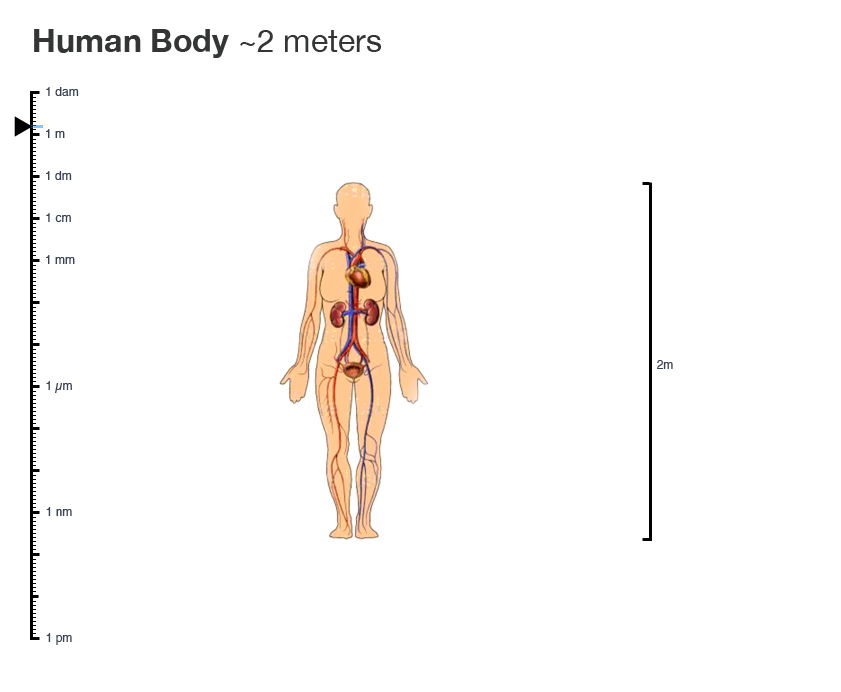
<style>
.page{position:relative;width:841px;height:692px;background:#ffffff}
.page>*{position:absolute;margin:0}
.t1{font:32px "HelveticaNeue-Bold";color:#343535}
.t2{font:32px "HelveticaNeue";color:#343535}
.t3{font:12px "Helvetica";color:#394255}
</style>
<div class="page">
<p class="t1" style="left:34px;top:29px;width:347px;height:29px">Human Body <span class="t2">~2 meters</span></p>
<p class="t3" style="left:46px;top:87px;width:33px;height:9px">1 dam</p>
<p class="t3" style="left:46px;top:129px;width:19px;height:9px">1 m</p>
<p class="t3" style="left:46px;top:171px;width:26px;height:9px">1 dm</p>
<p class="t3" style="left:46px;top:213px;width:25px;height:9px">1 cm</p>
<p class="t3" style="left:46px;top:255px;width:29px;height:9px">1 mm</p>
<p class="t3" style="left:657px;top:360px;width:16px;height:9px">2m</p>
<p class="t3" style="left:46px;top:381px;width:26px;height:12px">1 µm</p>
<p class="t3" style="left:46px;top:507px;width:26px;height:9px">1 nm</p>
<p class="t3" style="left:46px;top:633px;width:26px;height:12px">1 pm</p>
</div>
